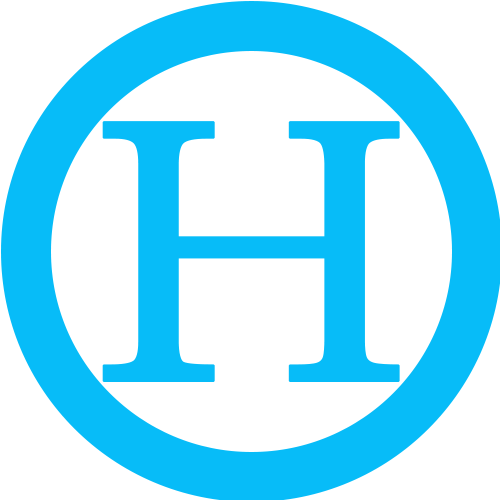
<style>
.page{position:relative;width:500px;height:500px;background:#ffffff}
.page>*{position:absolute;margin:0}
.t1{font:380.1px "STZhongsong";color:#07bcf8;font-weight:bold;scale:1.1 1}
</style>
<div class="page">
<p class="t1" style="left:102px;top:121px;width:298px;height:261px">H</p>
</div>
